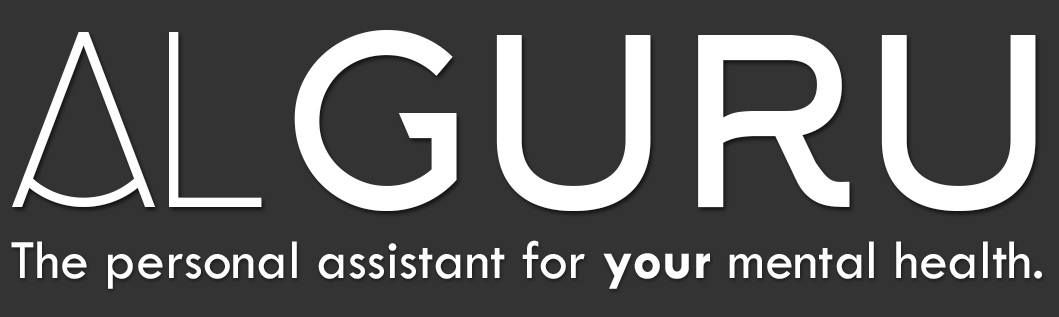
<style>
.page{position:relative;width:1059px;height:317px;background:#333333}
.page>*{position:absolute;margin:0}
.t1{font:231px "Arkhip";color:#ffffff}
.t2{font:333.5px "Azedo-Light";color:#ffffff}
.t3{font:27.5px "TwCenMT-Regular";color:#ffffff}
.t4{font:57.4px "TwCenMT-Bold";color:#ffffff}
.t5{font:57.4px "TwCenMT-Regular";color:#ffffff}
</style>
<div class="page">
<p class="t1" style="left:12px;top:30px;width:1024px;height:181px"><span class="t2">Al</span>GURU</p>
<p class="t3" style="left:11px;top:240px;width:1031px;height:49px">The personal assistant for <span class="t4">your</span><span class="t5"> mental health.</span></p>
</div>
